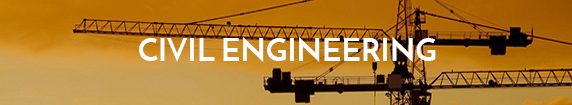
<style>
.page{position:relative;width:572px;height:105px}
.page>*{position:absolute;margin:0}
.t1{font:30.8px "JosefinSans-Bold";letter-spacing:0.01em;color:#ffffff}
</style>
<div class="page">
<p class="t1" style="left:139px;top:37px;width:297px;height:25px">CIVIL ENGINEERING</p>
</div>
